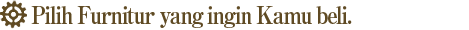
<style>
.page{position:relative;width:469px;height:30px;background:#ffffff}
.page>*{position:absolute;margin:0}
.t1{font:24px "RyuminPro-ExBold";letter-spacing:-0.08em;color:#5f4a23;scale:0.9 1}
</style>
<div class="page">
<p class="t1" style="left:31px;top:6px;width:321px;height:22px">Pilih Furnitur yang ingin Kamu beli.</p>
</div>
